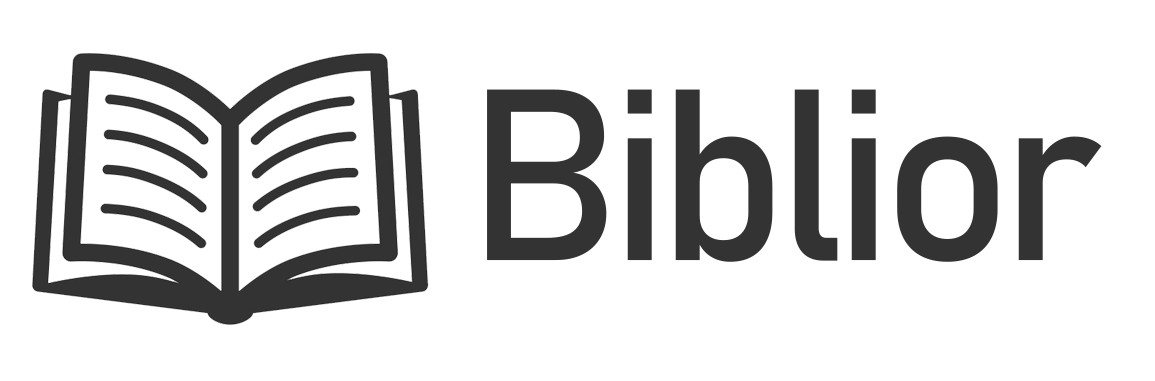
<style>
.page{position:relative;width:1155px;height:381px;background:#ffffff}
.page>*{position:absolute;margin:0}
.t1{font:240px "Bahnschrift";letter-spacing:-0.05em;color:#333333;font-style:italic}
</style>
<div class="page">
<p class="t1" style="left:487px;top:89px;width:615px;height:173px">Biblior</p>
</div>
